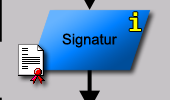
<style>
.page{position:relative;width:170px;height:100px;background:#c6c3c6}
.page>*{position:absolute;margin:0}
.t1{font:24px "Fixedsys";color:#ffff00}
.t2{font:14.7px "ArialMT";color:#000000}
</style>
<div class="page">
<p class="t1" style="left:129px;top:12px;width:12px;height:19px">i</p>
<p class="t2" style="left:62px;top:33px;width:55px;height:15px">Signatur</p>
</div>
